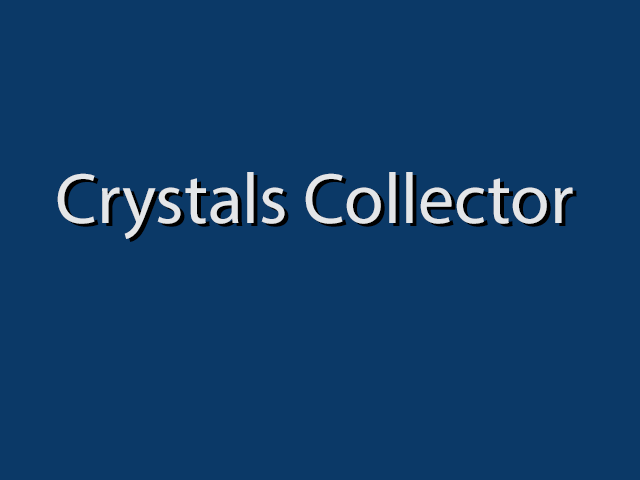
<style>
.page{position:relative;width:640px;height:480px;background:#0b3967}
.page>*{position:absolute;margin:0}
.t1{font:72px "MyriadPro-Regular";color:#e4e6e8}
</style>
<div class="page">
<p class="t1" style="left:57px;top:172px;width:516px;height:67px">Crystals Collector</p>
</div>
